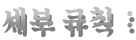
<style>
.page{position:relative;width:136px;height:40px;background:#ffffff}
.page>*{position:absolute;margin:0}
.t1{font:26.9px "SDKukdetopokki-bBd";letter-spacing:0.08em}
</style>
<div class="page">
<p class="t1" style="left:2px;top:6px;width:131px;height:26px">세부 규칙 :</p>
</div>
